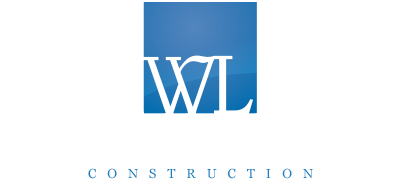
<style>
.page{position:relative;width:401px;height:180px;background:#ffffff}
.page>*{position:absolute;margin:0}
.t1{font:13px "Georgia";letter-spacing:0.85em;color:#1f7dbc}
</style>
<div class="page">
<p class="t1" style="left:88px;top:168px;width:225px;height:11px">CONSTRUCTION</p>
</div>
